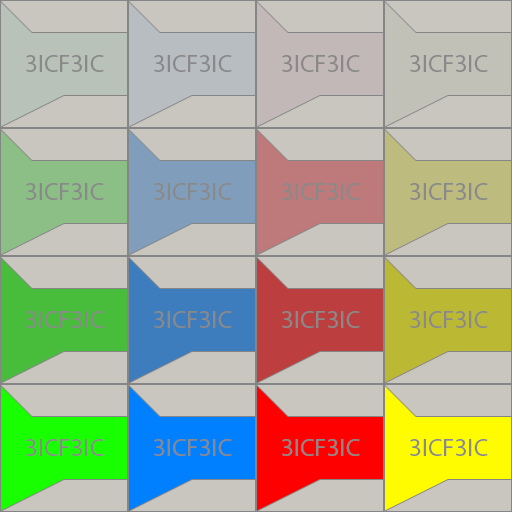
<style>
.page{position:relative;width:512px;height:512px;background:#c8c6bf}
.page>*{position:absolute;margin:0}
.t1{font:25px "MyriadPro-Regular";color:#898989}
</style>
<div class="page">
<p class="t1" style="left:26px;top:55px;width:78px;height:17px">3ICF3IC</p>
<p class="t1" style="left:154px;top:55px;width:78px;height:17px">3ICF3IC</p>
<p class="t1" style="left:282px;top:55px;width:78px;height:17px">3ICF3IC</p>
<p class="t1" style="left:410px;top:55px;width:78px;height:17px">3ICF3IC</p>
<p class="t1" style="left:26px;top:183px;width:78px;height:17px">3ICF3IC</p>
<p class="t1" style="left:154px;top:183px;width:78px;height:17px">3ICF3IC</p>
<p class="t1" style="left:282px;top:183px;width:78px;height:17px">3ICF3IC</p>
<p class="t1" style="left:410px;top:183px;width:78px;height:17px">3ICF3IC</p>
<p class="t1" style="left:26px;top:311px;width:78px;height:17px">3ICF3IC</p>
<p class="t1" style="left:154px;top:311px;width:78px;height:17px">3ICF3IC</p>
<p class="t1" style="left:282px;top:311px;width:78px;height:17px">3ICF3IC</p>
<p class="t1" style="left:410px;top:311px;width:78px;height:17px">3ICF3IC</p>
<p class="t1" style="left:26px;top:439px;width:78px;height:17px">3ICF3IC</p>
<p class="t1" style="left:154px;top:439px;width:78px;height:17px">3ICF3IC</p>
<p class="t1" style="left:282px;top:439px;width:78px;height:17px">3ICF3IC</p>
<p class="t1" style="left:410px;top:439px;width:78px;height:17px">3ICF3IC</p>
</div>
